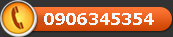
<style>
.page{position:relative;width:173px;height:37px;background:#333333}
.page>*{position:absolute;margin:0}
.t1{font:17px "Tahoma-Bold";color:#f5f8fb}
</style>
<div class="page">
<p class="t1" style="left:44px;top:13px;width:110px;height:12px">0906345354</p>
</div>
